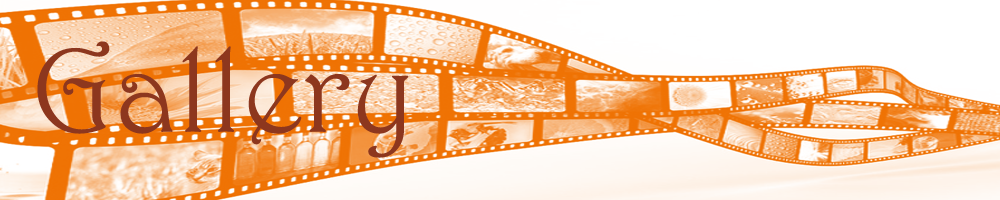
<style>
.page{position:relative;width:1000px;height:200px}
.page>*{position:absolute;margin:0}
.t1{font:120px "Harrington";color:#8d371e}
</style>
<div class="page">
<p class="t1" style="left:37px;top:41px;width:372px;height:117px">Gallery</p>
</div>
